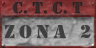
<style>
.page{position:relative;width:96px;height:48px}
.page>*{position:absolute;margin:0}
.t1{font:16.7px "Army";color:#303030;text-transform:uppercase}
.t2{font:19px "Army";letter-spacing:0.22em;color:#3f3f3f;text-transform:uppercase;scale:1.04 1}
</style>
<div class="page">
<p class="t1" style="left:13px;top:1px;width:70px;height:13px">c. t. c. t</p>
<p class="t2" style="left:4px;top:24px;width:87px;height:15px">zona 2</p>
</div>
